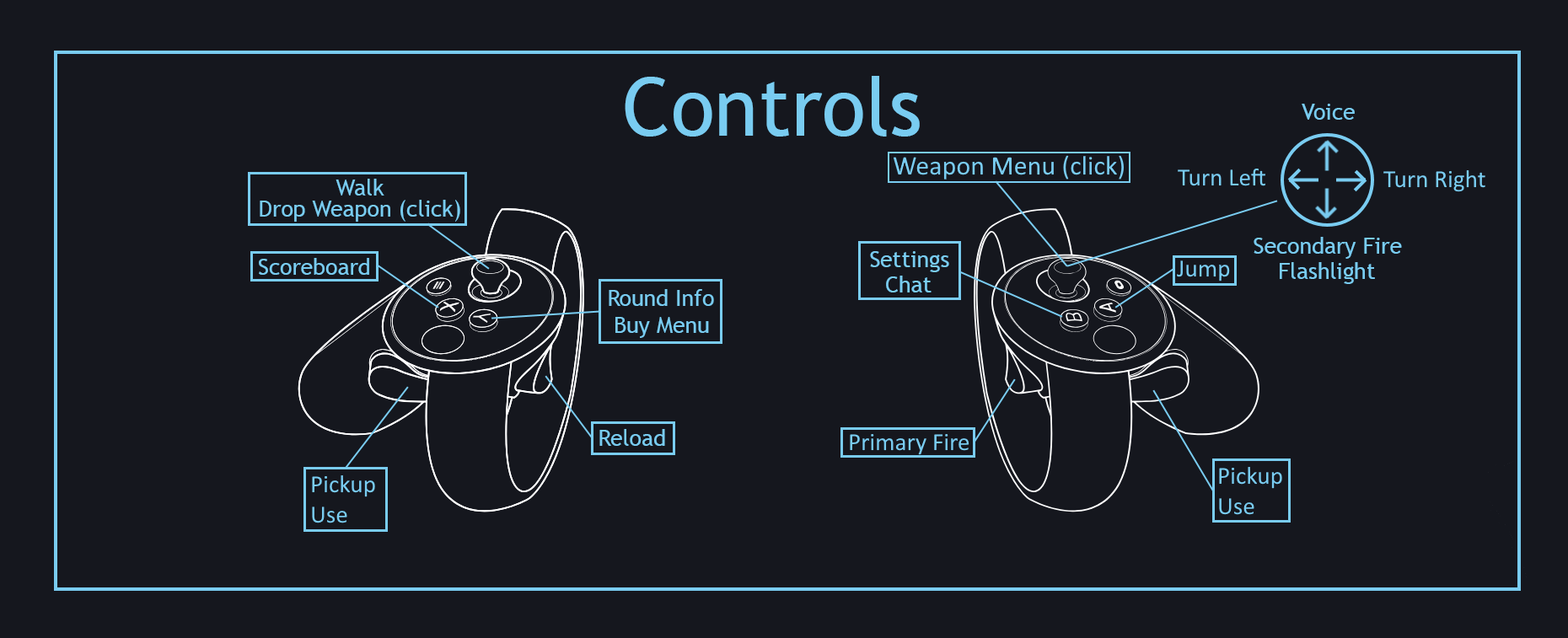
<style>
.page{position:relative;width:1568px;height:638px;background:#15171e}
.page>*{position:absolute;margin:0}
.t1{font:80.9px "TrebuchetMS";color:#79ccf1}
.t2{font:22.5px "TrebuchetMS";color:#79ccf1}
</style>
<div class="page">
<p class="t1" style="left:625px;top:76px;width:295px;height:61px">Controls</p>
<p class="t2" style="left:1302px;top:104px;width:53px;height:16px">Voice</p>
<p class="t2" style="left:336px;top:179px;width:48px;height:17px">Walk</p>
<p class="t2" style="left:260px;top:200px;width:200px;height:22px">Drop Weapon (click)</p>
<p class="t2" style="left:1254px;top:237px;width:148px;height:22px">Secondary Fire</p>
<p class="t2" style="left:259px;top:258px;width:110px;height:17px">Scoreboard</p>
<p class="t2" style="left:870px;top:251px;width:79px;height:21px">Settings</p>
<p class="t2" style="left:1280px;top:262px;width:95px;height:22px">Flashlight</p>
<p class="t2" style="left:886px;top:276px;width:46px;height:17px">Chat</p>
<p class="t2" style="left:609px;top:289px;width:105px;height:17px">Round Info</p>
<p class="t2" style="left:615px;top:317px;width:94px;height:21px">Buy Menu</p>
<p class="t2" style="left:599px;top:429px;width:66px;height:17px">Reload</p>
</div>
